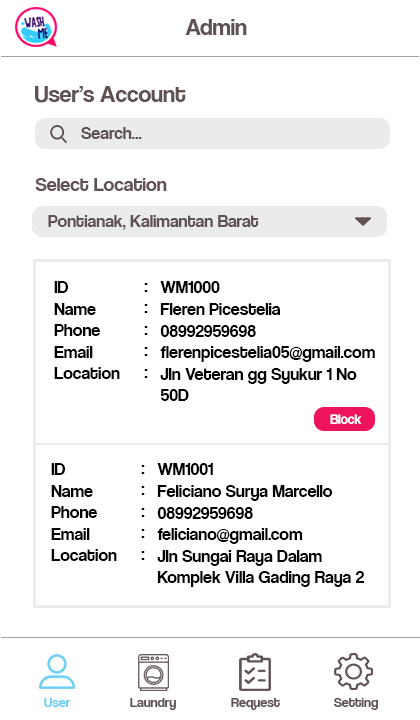
<style>
.page{position:relative;width:420px;height:720px;background:#ffffff}
.page>*{position:absolute;margin:0}
.t1{font:24px "CoolveticaRg-Regular";color:#605252}
.t2{font:18px "CoolveticaRg-Regular";color:#605252}
.t3{font:20px "CoolveticaRg-Regular";color:#605252}
.t4{font:18px "CoolveticaRg-Regular";color:#010101}
.t5{font:18px "CoolveticaRg-Regular";color:#000000}
.t6{font:15.4px "CoolveticaRg-Regular";color:#ffffff;scale:0.89 1}
.t7{font:14px "CoolveticaRg-Regular";color:#6dcff6}
.t8{font:14px "CoolveticaRg-Regular";color:#605252}
</style>
<div class="page">
<p class="t1" style="left:185px;top:19px;width:62px;height:16px">Admin</p>
<p class="t1" style="left:35px;top:86px;width:151px;height:17px">User’s Account</p>
<p class="t2" style="left:81px;top:127px;width:61px;height:12px">Search...</p>
<p class="t3" style="left:35px;top:178px;width:132px;height:13px">Select Location</p>
<p class="t2" style="left:48px;top:215px;width:211px;height:15px">Pontianak, Kalimantan Barat</p>
<p class="t4" style="left:54px;top:281px;width:66px;height:98px">ID<br>Name <br>Phone <br>Email <br>Location</p>
<p class="t5" style="left:160px;top:281px;width:215px;height:120px">WM1000<br>Fleren Picestelia<br>08992959698<br>flerenpicestelia05@gmail.com<br>Jln Veteran gg Syukur 1 No<br>50D</p>
<p class="t5" style="left:144px;top:283px;width:4px;height:95px">:<br>:<br>:<br>:<br>:</p>
<p class="t6" style="left:330px;top:414px;width:32px;height:10px">Block</p>
<p class="t4" style="left:51px;top:463px;width:66px;height:98px">ID<br>Name <br>Phone <br>Email <br>Location</p>
<p class="t5" style="left:141px;top:465px;width:4px;height:95px">:<br>:<br>:<br>:<br>:</p>
<p class="t5" style="left:157px;top:463px;width:207px;height:124px">WM1001<br>Feliciano Surya Marcello<br>08992959698<br>feliciano@gmail.com<br>Jln Sungai Raya Dalam<br>Komplek Villa Gading Raya 2</p>
<p class="t7" style="left:44px;top:698px;width:27px;height:9px">User</p>
<p class="t8" style="left:130px;top:698px;width:46px;height:12px">Laundry</p>
<p class="t8" style="left:231px;top:698px;width:49px;height:12px">Request</p>
<p class="t8" style="left:334px;top:698px;width:45px;height:12px">Setting</p>
</div>
